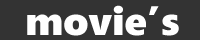
<style>
.page{position:relative;width:200px;height:40px;background:#333333}
.page>*{position:absolute;margin:0}
.t1{font:40px "SegoeUIBlack";color:#ffffff}
</style>
<div class="page">
<p class="t1" style="left:27px;top:5px;width:152px;height:31px">movie’s</p>
</div>
